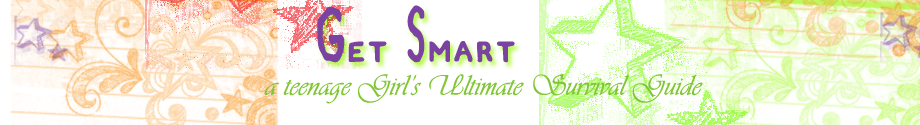
<style>
.page{position:relative;width:920px;height:125px;background:#ffffff}
.page>*{position:absolute;margin:0}
.t1{font:72px "Zamboni-Joe";color:#7b42a1}
.t2{font:30px "Vivaldii";color:#81c635}
</style>
<div class="page">
<p class="t1" style="left:317px;top:5px;width:198px;height:58px">Get Smart</p>
<p class="t2" style="left:264px;top:74px;width:439px;height:30px">a teenage Girl’s Ultimate Survival Guide</p>
</div>
